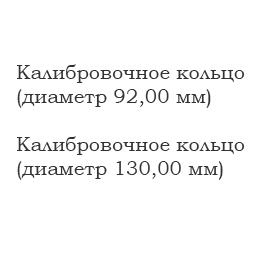
<style>
.page{position:relative;width:256px;height:256px;background:#ffffff}
.page>*{position:absolute;margin:0}
.t1{font:20px "BookmanOldStyle";color:#333333}
</style>
<div class="page">
<p class="t1" style="left:16px;top:64px;width:229px;height:116px">Калибровочное кольцо<br>(диаметр 92,00 мм)<br><br>Калибровочное кольцо<br>(диаметр 130,00 мм)</p>
</div>
